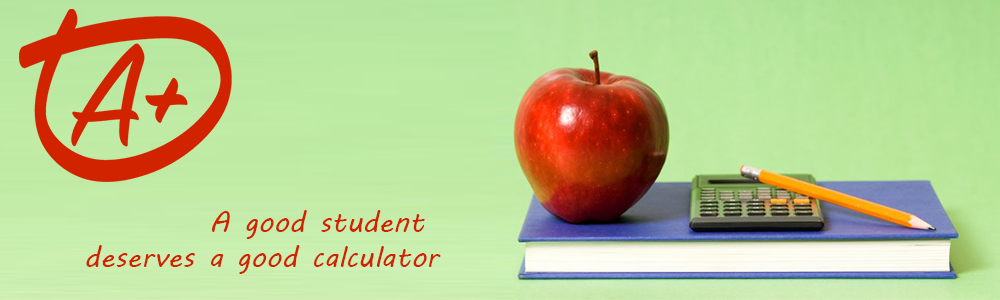
<style>
.page{position:relative;width:1000px;height:300px}
.page>*{position:absolute;margin:0}
.t1{font:29.2px "MVBoli";color:#d22300}
</style>
<div class="page">
<p class="t1" style="left:86px;top:210px;width:355px;height:64px;text-align:right">A good student <br>deserves a good calculator</p>
</div>
